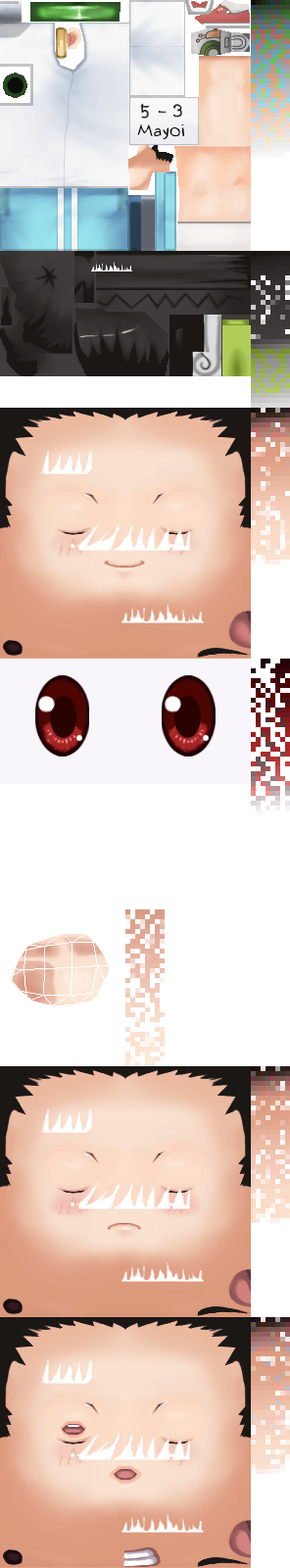
<style>
.page{position:relative;width:290px;height:1568px;background:#ffffff}
.page>*{position:absolute;margin:0}
.t1{font:15.7px "Augie";letter-spacing:0.05em;color:#000000}
</style>
<div class="page">
<p class="t1" style="left:137px;top:124px;width:47px;height:15px">Mayoi</p>
</div>
